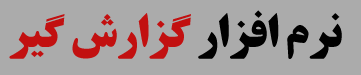
<style>
.page{position:relative;width:361px;height:75px;background:#ababab}
.page>*{position:absolute;margin:0}
.t1{font:46.4px "BTitrBold";letter-spacing:-0.02em;color:#000000;font-weight:bold;scale:1.04 1}
.t2{font:46.4px "BTitrBold";letter-spacing:-0.02em;color:#c21010;font-weight:bold;scale:1.04 1}
</style>
<div class="page">
<p class="t1" style="left:9px;top:10px;width:333px;height:49px">نرم افزار<span class="t2"> گزارش گیر</span></p>
</div>
